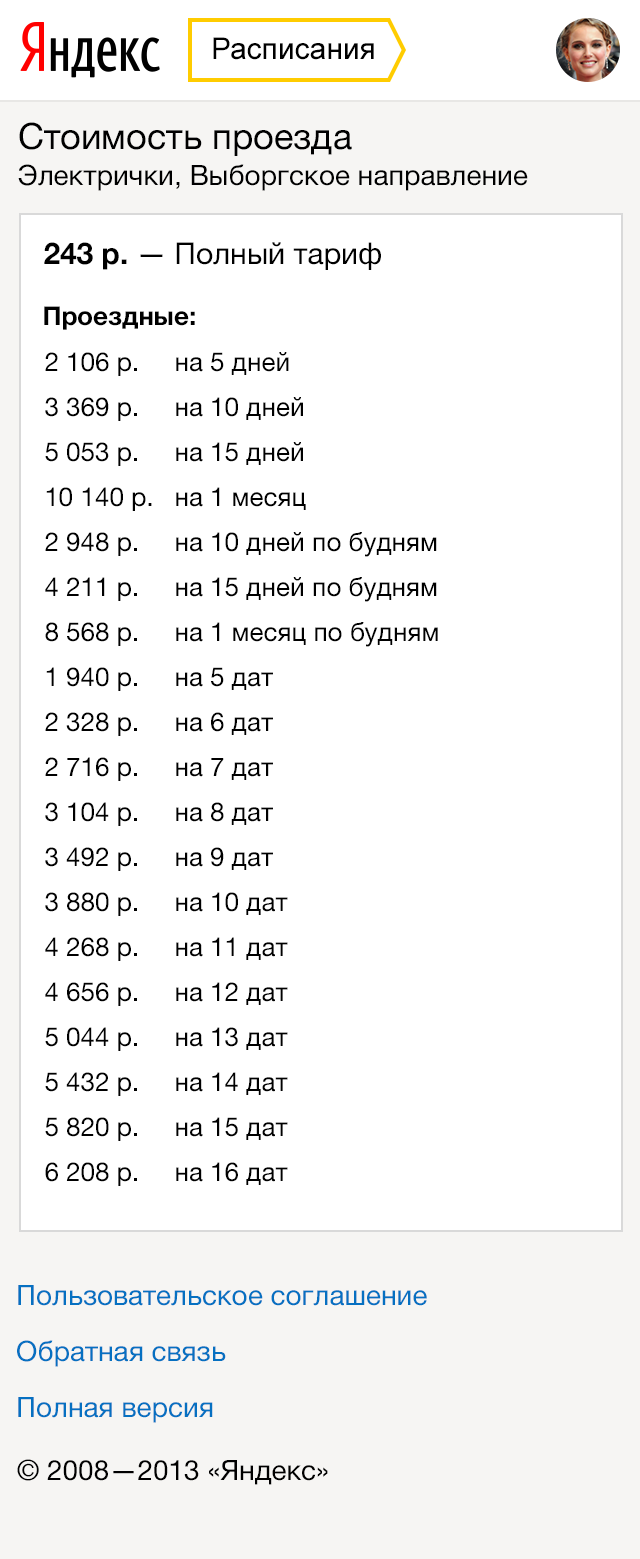
<style>
.page{position:relative;width:640px;height:1559px;background:#ffffff}
.page>*{position:absolute;margin:0}
.t1{font:30px "ArialMT";color:#000000}
.t2{font:28px/36px "HelveticaNeue";color:#000000}
.t3{font:36px/36px "HelveticaNeue";color:#000000}
.t4{font:30px "HelveticaNeue-Bold";color:#000000}
.t5{font:30px "HelveticaNeue";color:#000000}
.t6{font:26px "HelveticaNeue-Bold";color:#000000}
.t7{font:26px/45px "HelveticaNeue";color:#000000}
.t8{font:28px/56px "HelveticaNeue";color:#0670c1}
.t9{font:28px "HelveticaNeue";color:#000000}
</style>
<div class="page">
<p class="t1" style="left:213px;top:37px;width:161px;height:23px">Расписания</p>
<p class="t2" style="left:18px;top:122px;width:510px;height:69px"><span class="t3">Стоимость проезда<br></span>Электрички, Выборгское направление</p>
<p class="t4" style="left:44px;top:242px;width:83px;height:28px">243 р.</p>
<p class="t5" style="left:140px;top:242px;width:241px;height:28px">— Полный тариф</p>
<p class="t6" style="left:44px;top:306px;width:151px;height:24px">Проездные:</p>
<p class="t7" style="left:45px;top:352px;width:107px;height:834px">2 106 р.<br>3 369 р.<br>5 053 р.<br>10 140 р.<br>2 948 р.<br>4 211 р.<br>8 568 р.<br>1 940 р.<br>2 328 р.<br>2 716 р.<br>3 104 р.<br>3 492 р.<br>3 880 р.<br>4 268 р.<br>4 656 р.<br>5 044 р.<br>5 432 р.<br>5 820 р.<br>6 208 р.</p>
<p class="t7" style="left:176px;top:352px;width:262px;height:833px">на 5 дней<br>на 10 дней<br>на 15 дней<br>на 1 месяц<br>на 10 дней по будням<br>на 15 дней по будням<br>на 1 месяц по будням<br>на 5 дат<br>на 6 дат<br>на 7 дат<br>на 8 дат<br>на 9 дат<br>на 10 дат<br>на 11 дат<br>на 12 дат<br>на 13 дат<br>на 14 дат<br>на 15 дат<br>на 16 дат</p>
<p class="t8" style="left:17px;top:1285px;width:410px;height:138px">Пользовательское соглашение<br>Обратная связь<br>Полная версия</p>
<p class="t9" style="left:17px;top:1459px;width:311px;height:26px">© 2008—2013 «Яндекс»</p>
</div>
